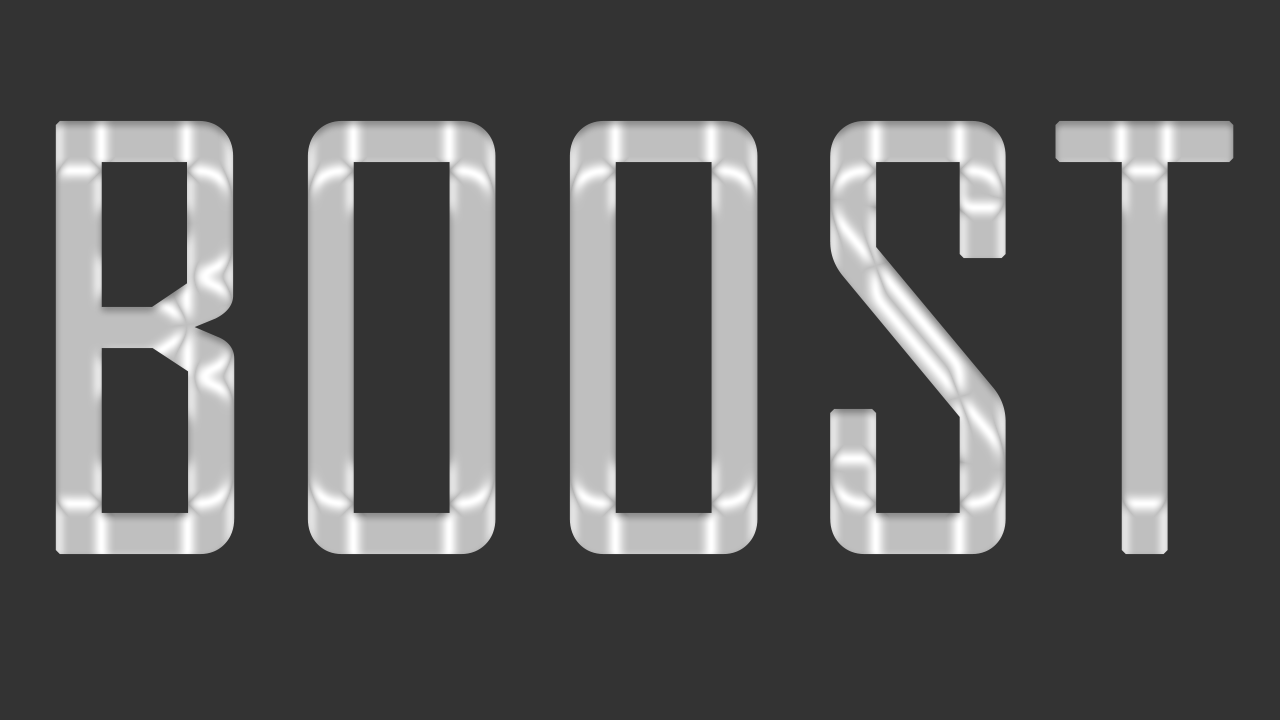
<style>
.page{position:relative;width:1280px;height:720px;background:#333333}
.page>*{position:absolute;margin:0}
.t1{font:555.9px "AgencyFB-Reg";color:#bfbfbf;font-weight:bold}
</style>
<div class="page">
<p class="t1" style="left:55px;top:120px;width:1179px;height:435px">BOOST</p>
</div>
